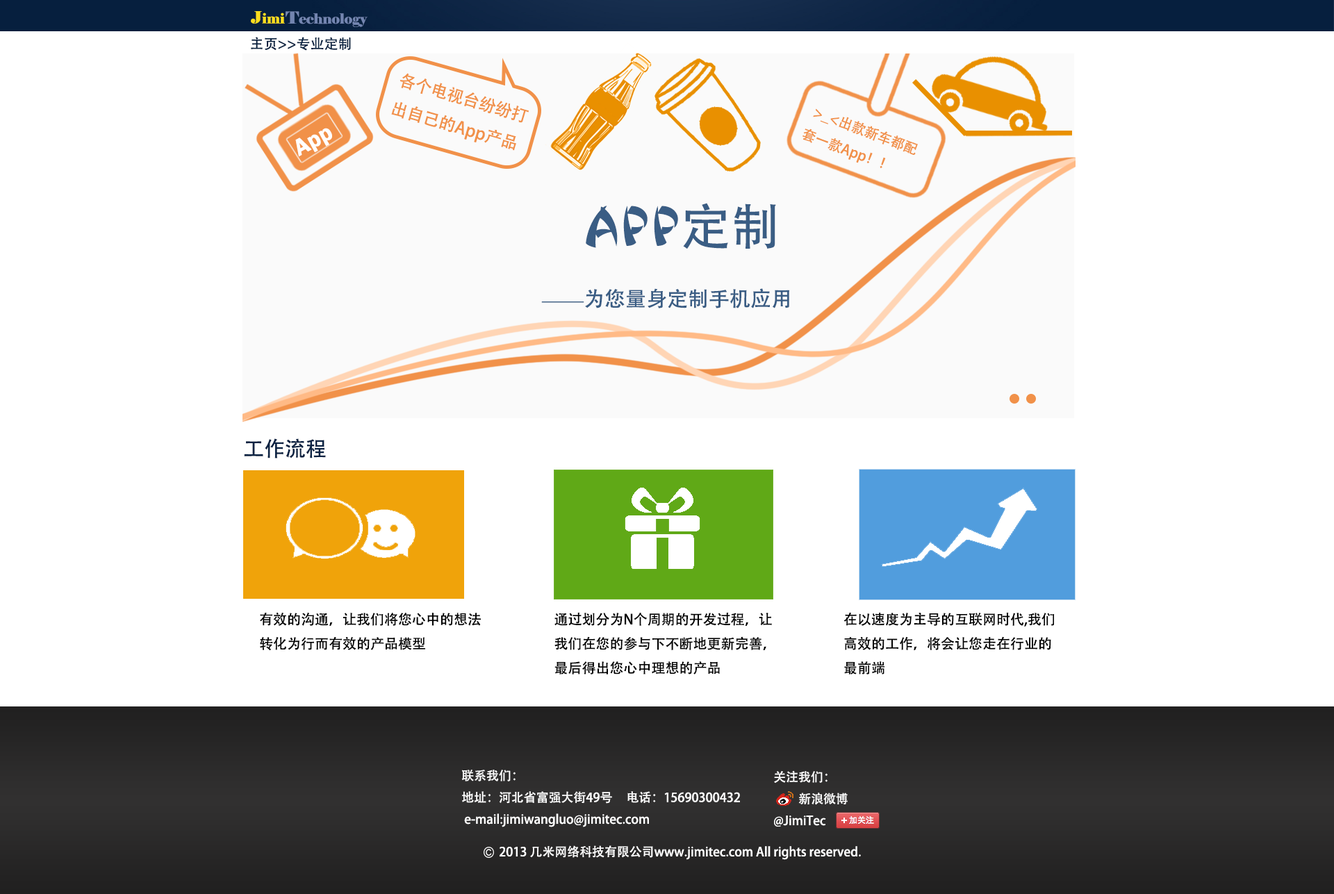
<style>
.page{position:relative;width:1334px;height:894px;background:#ffffff}
.page>*{position:absolute;margin:0}
.t1{font:13.9px "Elephant-Regular";color:#fadd1d}
.t2{font:16.7px "Elephant-Regular";color:#fadd1d}
.t3{font:13.9px "Elephant-Regular";color:#7385b0}
.t4{font:16.7px "Elephant-Regular";color:#7385b0}
.t5{font:13.9px "AdobeHeitiStd-Regular";color:#092241}
.t6{font:16.7px "AdobeHeitiStd-Regular";color:#f19149}
.t7{font:13.9px "AdobeHeitiStd-Regular";color:#f19149}
.t8{font:23.9px "FranklinGothic-Demi";color:#ffffff}
.t9{font:20.8px "AdobeHeitiStd-Regular";color:#3a5d84}
.t10{font:50px "Elephant-Regular";color:#3a5d84}
.t11{font:50px "JingJing";color:#3a5d84}
.t12{font:50px "AdobeHeitiStd-Regular";color:#3a5d84}
.t13{font:20.8px "MaturaMTScriptCapitals";color:#3a5d84}
.t14{font:20.8px "AdobeHeitiStd-Regular";color:#0c2343}
.t15{font:13.9px "AdobeHeitiStd-Regular";color:#000000}
.t16{font:12.4px "AdobeHeitiStd-Regular";color:#ffffff}
.t17{font:12.5px "AdobeHeitiStd-Regular";color:#ffffff}
</style>
<div class="page">
<p class="t1" style="left:251px;top:11px;width:34px;height:13px"><span class="t2">J</span>imi</p>
<p class="t3" style="left:286px;top:11px;width:81px;height:16px"><span class="t4">T</span>echnology</p>
<p class="t5" style="left:251px;top:37px;width:100px;height:14px">主页&gt;&gt;专业定制</p>
<p class="t6" style="left:391px;top:73px;width:138px;height:78px;rotate:16deg">各个电视台纷纷打<br>出自己的App产品</p>
<p class="t7" style="left:802px;top:108px;width:116px;height:60px;rotate:20deg">&gt;_&lt;出款新车都配<br>套一款App！！</p>
<p class="t8" style="left:295px;top:128px;width:37px;height:29px;rotate:-29deg">App</p>
<p class="t9" style="left:541px;top:203px;width:248px;height:105px"><span class="t10">   </span><span class="t11">App</span><span class="t12">定制<br></span><span class="t13">——</span>为您量身定制手机应用</p>
<p class="t14" style="left:244px;top:438px;width:82px;height:20px">工作流程</p>
<p class="t15" style="left:260px;top:612px;width:221px;height:39px">有效的沟通，让我们将您心中的想法<br>转化为行而有效的产品模型</p>
<p class="t15" style="left:554px;top:613px;width:218px;height:62px">通过划分为N个周期的开发过程，让<br>我们在您的参与下不断地更新完善，<br>最后得出您心中理想的产品</p>
<p class="t15" style="left:843px;top:612px;width:212px;height:63px">在以速度为主导的互联网时代,我们<br>高效的工作，将会让您走在行业的<br>最前端</p>
<p class="t16" style="left:461px;top:770px;width:279px;height:57px">联系我们：<br>地址：河北省富强大街49号     电话：15690300432     <br> e-mail:jimiwangluo@jimitec.com</p>
<p class="t16" style="left:774px;top:770px;width:73px;height:57px">关注我们：<br> 新浪微博<br>@JimiTec</p>
<p class="t17" style="left:499px;top:845px;width:362px;height:15px">2013 几米网络科技有限公司www.jimitec.com All rights reserved.</p>
</div>
